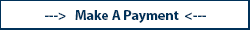
<style>
.page{position:relative;width:250px;height:30px;background:#ffffff}
.page>*{position:absolute;margin:0}
.t1{font:14px "MyriadPro-Bold";color:#003159}
</style>
<div class="page">
<p class="t1" style="left:45px;top:10px;width:161px;height:13px">---&gt;   Make A Payment  &lt;---</p>
</div>
